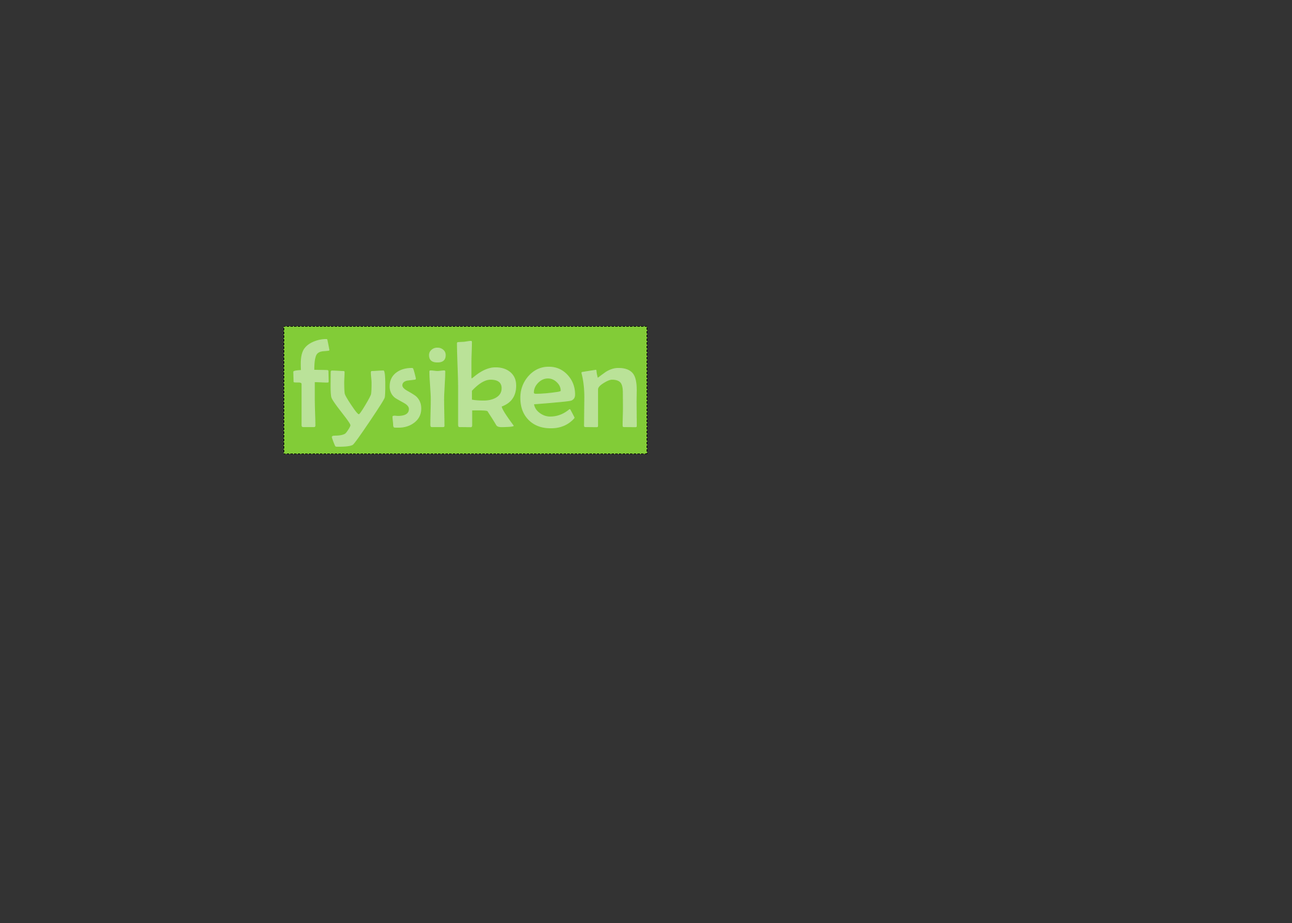
<style>
.page{position:relative;width:1292px;height:923px;background:#333333}
.page>*{position:absolute;margin:0}
.t1{font:123.1px "BerlinSansFB-Reg";color:#bae298}
</style>
<div class="page">
<p class="t1" style="left:293px;top:339px;width:344px;height:108px">fysiken</p>
</div>
